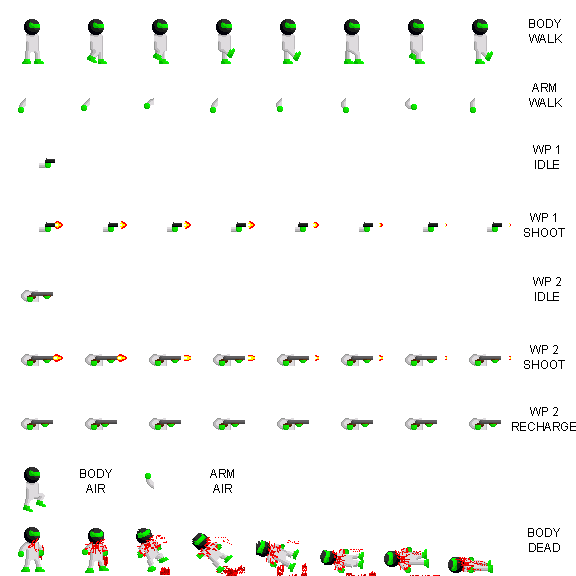
<style>
.page{position:relative;width:576px;height:576px;background:#ffffff}
.page>*{position:absolute;margin:0}
.t1{font:11.7px "ArialMT";color:#000000}
</style>
<div class="page">
<p class="t1" style="left:529px;top:19px;width:33px;height:24px;text-align:center">BODY<br>WALK</p>
<p class="t1" style="left:529px;top:83px;width:33px;height:24px;text-align:center">ARM<br>WALK</p>
<p class="t1" style="left:533px;top:145px;width:26px;height:24px;text-align:center">WP 1<br>IDLE</p>
<p class="t1" style="left:524px;top:213px;width:41px;height:24px;text-align:center">WP 1<br>SHOOT</p>
<p class="t1" style="left:533px;top:277px;width:28px;height:24px;text-align:center">WP 2<br>IDLE</p>
<p class="t1" style="left:524px;top:345px;width:41px;height:24px;text-align:center">WP 2<br>SHOOT</p>
<p class="t1" style="left:512px;top:407px;width:64px;height:24px;text-align:center">WP 2<br>RECHARGE</p>
<p class="t1" style="left:80px;top:469px;width:32px;height:24px;text-align:center">BODY<br>AIR</p>
<p class="t1" style="left:210px;top:469px;width:24px;height:24px;text-align:center">ARM<br>AIR</p>
<p class="t1" style="left:528px;top:528px;width:32px;height:24px;text-align:center">BODY<br>DEAD</p>
</div>
